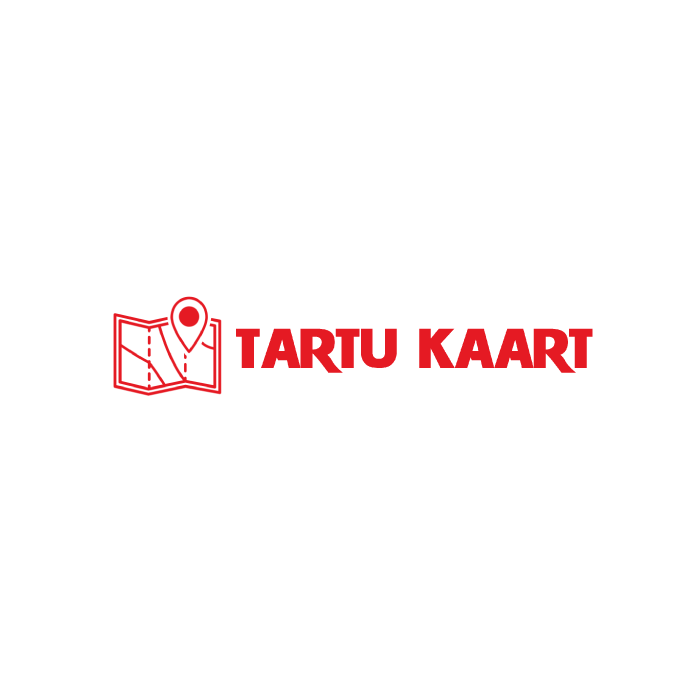
<style>
.page{position:relative;width:700px;height:700px;background:#ffffff}
.page>*{position:absolute;margin:0}
.t1{font:97.4px "WRESTLEMANIA";color:#e51a23;scale:1.13 1}
</style>
<div class="page">
<p class="t1" style="left:236px;top:328px;width:357px;height:45px">TARTU KAART</p>
</div>
